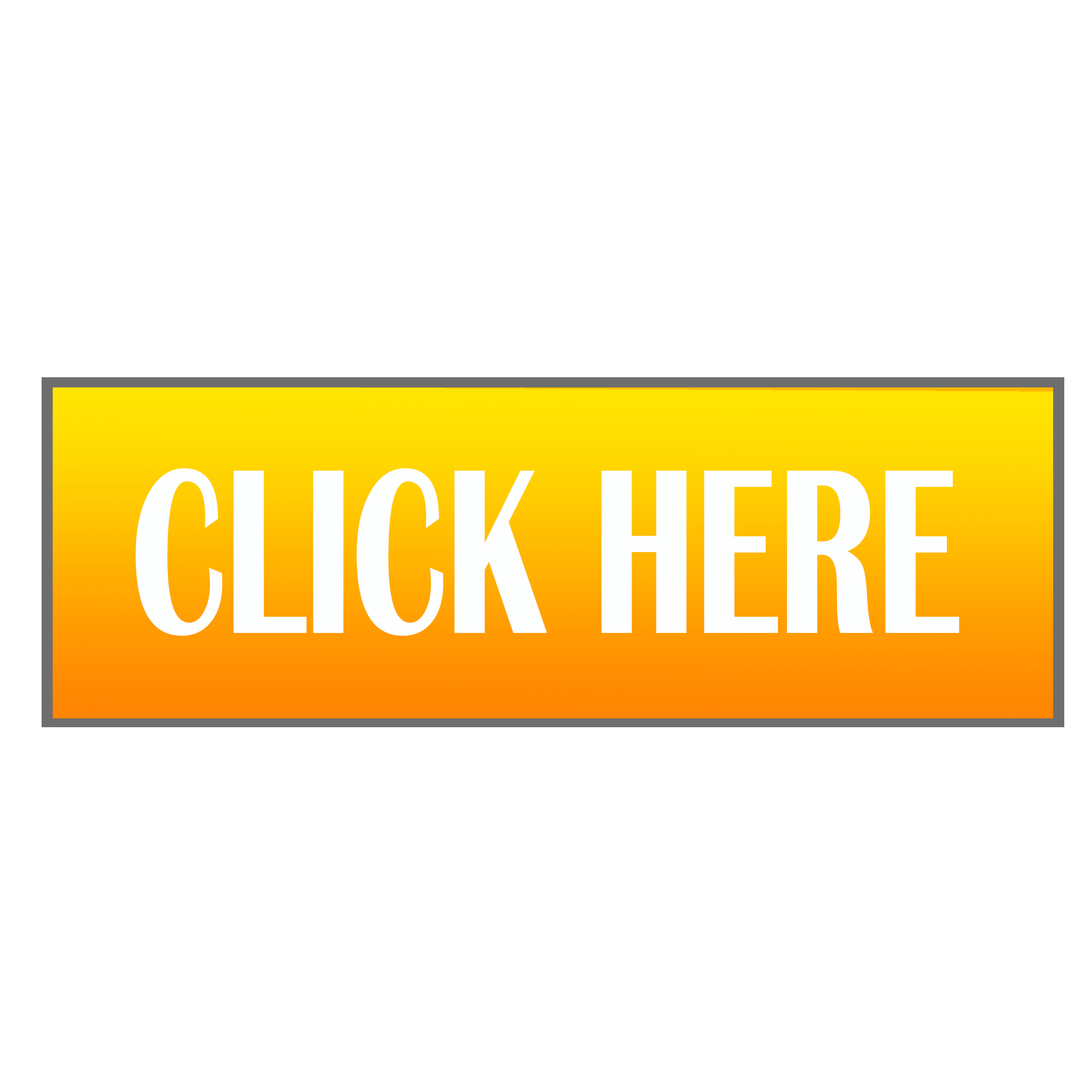
<style>
.page{position:relative;width:1092px;height:1092px;background:#ffffff}
.page>*{position:absolute;margin:0}
.t1{font:243.2px "BritannicBold";color:#fdfefe;scale:0.64 1}
</style>
<div class="page">
<p class="t1" style="left:135px;top:468px;width:824px;height:168px">CLICK HERE</p>
</div>
